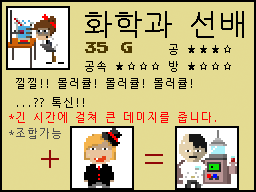
<style>
.page{position:relative;width:256px;height:192px;background:#e4db92}
.page>*{position:absolute;margin:0}
.t1{font:30px "NanumGothicCoding";color:#000000}
.t2{font:12px "PressStart2P";color:#4b3800}
.t3{font:11px "NanumGothicCoding";color:#000000}
.t4{font:11px "NanumGothicCoding";color:#ff0000}
.t5{font:11px "NanumGothicCoding";color:#4f4f4f}
.t6{font:36px "NanumGothicCoding";color:#900707}
</style>
<div class="page">
<p class="t1" style="left:85px;top:11px;width:159px;height:27px">화학과 선배</p>
<p class="t2" style="left:85px;top:42px;width:47px;height:11px">35 G</p>
<p class="t3" style="left:169px;top:44px;width:62px;height:11px">공 ★★★☆</p>
<p class="t3" style="left:85px;top:61px;width:146px;height:11px">공속 ★☆☆☆ 방 ★☆☆☆</p>
<p class="t3" style="left:16px;top:78px;width:176px;height:30px">낄낄!! 몰러큘! 몰러큘! 몰러큘!<br>...?? 톡신!!</p>
<p class="t4" style="left:9px;top:112px;width:207px;height:11px">*긴 시간에 걸쳐 큰 데미지를 줍니다.</p>
<p class="t5" style="left:9px;top:128px;width:52px;height:11px">*조합가능</p>
<p class="t6" style="left:41px;top:150px;width:18px;height:18px">+</p>
<p class="t6" style="left:145px;top:154px;width:18px;height:10px">=</p>
</div>
